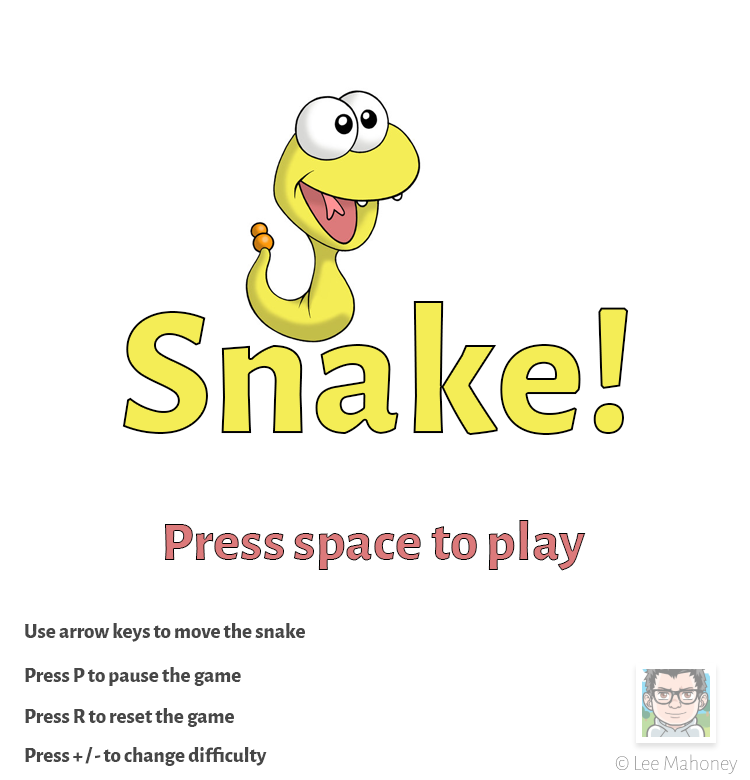
<style>
.page{position:relative;width:750px;height:780px;background:#ffffff}
.page>*{position:absolute;margin:0}
.t1{font:187px "AlegreyaSans-ExtraBold";color:#f4ed56}
.t2{font:57px "AlegreyaSans-ExtraBold"}
.t3{font:21px "AlegreyaSans-ExtraBold";color:#474747}
.t4{font:21px "AlegreyaSans-Thin";color:#979797}
</style>
<div class="page">
<p class="t1" style="left:122px;top:301px;width:507px;height:135px">Snake!</p>
<p class="t2" style="left:165px;top:520px;width:421px;height:51px">Press space to play</p>
<p class="t3" style="left:25px;top:623px;width:280px;height:19px">Use arrow keys to move the snake</p>
<p class="t3" style="left:25px;top:667px;width:216px;height:19px">Press P to pause the game</p>
<p class="t3" style="left:25px;top:708px;width:209px;height:19px">Press R to reset the game</p>
<p class="t3" style="left:25px;top:747px;width:242px;height:19px">Press + / - to change difficulty</p>
<p class="t4" style="left:615px;top:754px;width:123px;height:20px">© Lee Mahoney</p>
</div>
